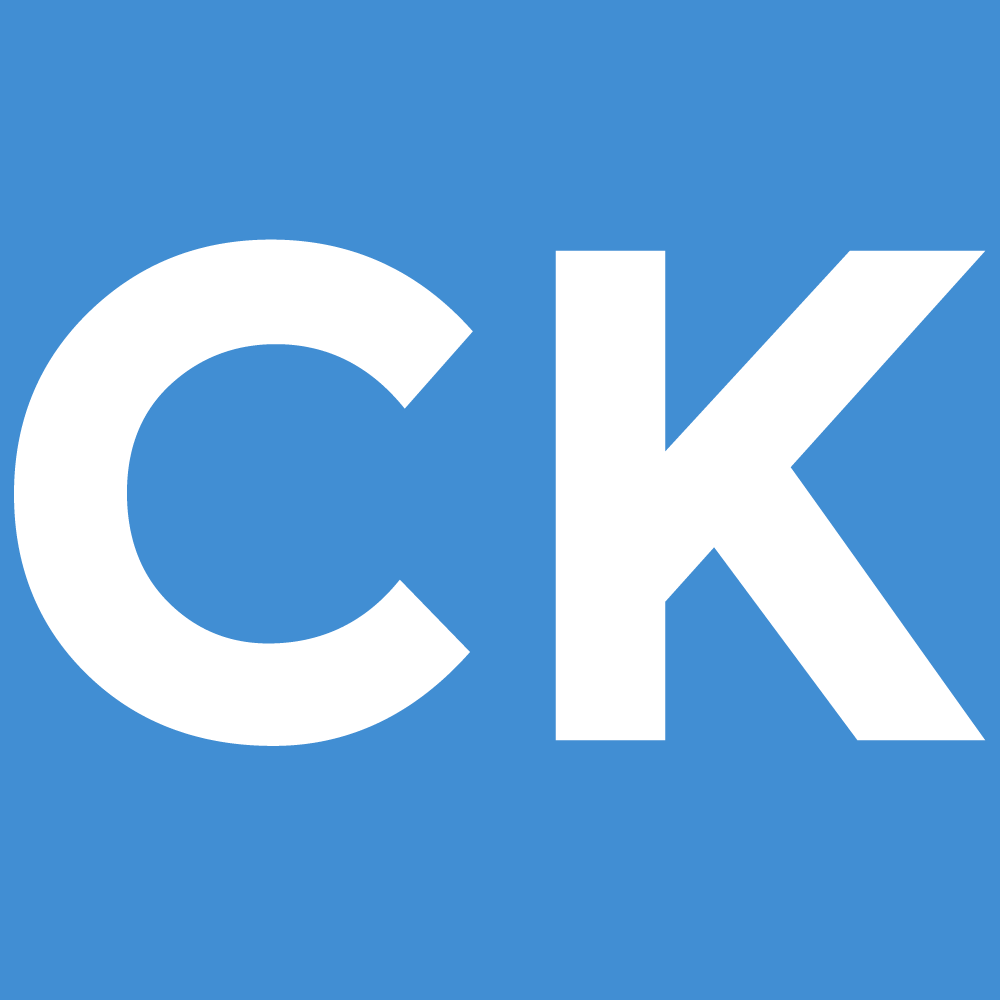
<style>
.page{position:relative;width:1000px;height:1000px;background:#418ed3}
.page>*{position:absolute;margin:0}
.t1{font:700px "Montserrat-Bold";color:#ffffff}
</style>
<div class="page">
<p class="t1" style="left:14px;top:239px;width:972px;height:507px">CK</p>
</div>
